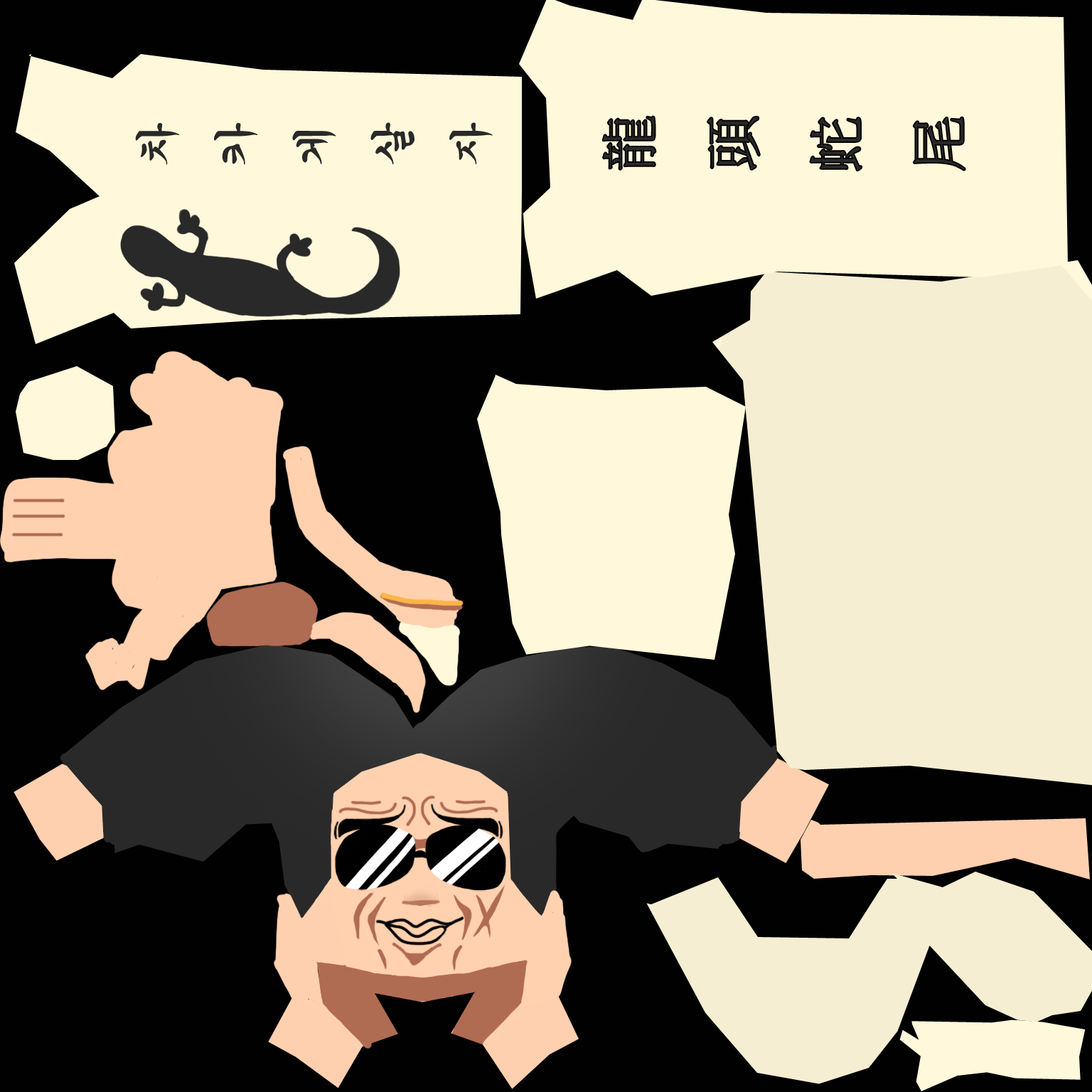
<style>
.page{position:relative;width:1092px;height:1092px;background:#010101}
.page>*{position:absolute;margin:0}
.t1{font:44.8px "GungsuhChe";color:#292929}
.t2{font:58.9px "GungsuhChe";color:#292929}
</style>
<div class="page">
<p class="t1" style="left:135px;top:122px;width:358px;height:43px;text-align:center;rotate:-90deg">차<br>카<br>게<br>살<br>자</p>
<p class="t2" style="left:603px;top:117px;width:362px;height:54px;text-align:center;rotate:-90deg">龍<br>頭<br>蛇<br>尾</p>
</div>
